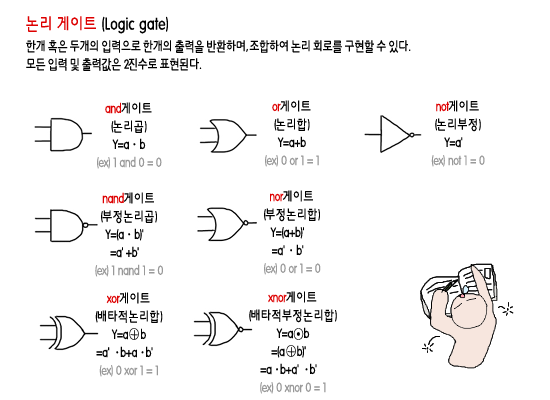
<style>
.page{position:relative;width:550px;height:400px;background:#ffffff}
.page>*{position:absolute;margin:0}
.t1{font:14px/18px "HYkanM";letter-spacing:-0.1em;color:#000000;scale:0.8 1}
.t2{font:18px/24px "HYkanM";letter-spacing:-0.05em;color:#dd0000;scale:0.8 1}
.t3{font:18px/24px "HYkanM";letter-spacing:-0.01em;color:#000000;scale:0.8 1}
.t4{font:14px/18px "HYkanM";letter-spacing:-0.05em;color:#999999;scale:0.8 1}
.t5{font:14px/18px "HYkanM";letter-spacing:-0.05em;color:#dd0000;scale:0.8 1}
.t6{font:14px/18px "HYkanM";letter-spacing:-0.05em;color:#000000;scale:0.8 1}
.t7{font:14px/18px "HYkanM";letter-spacing:-0.5em;color:#000000;scale:0.8 1}
.t8{font:14px/18px "HYkanM";letter-spacing:-0.6em;color:#000000;scale:0.8 1}
.t9{font:14px/18px "HYkanM";letter-spacing:-0.2em;color:#000000;scale:0.8 1}
</style>
<div class="page">
<p class="t1" style="left:26px;top:16px;width:385px;height:55px"><span class="t2">논리 게이트 </span><span class="t3">(Logic gate)<br></span>한개 혹은 두개의 입력으로 한개의 출력을 반환하며, 조합하여 논리 회로를 구현할 수 있다. <br>모든 입력 및 출력값은 2진수로 표현된다.</p>
<p class="t4" style="left:97px;top:102px;width:65px;height:67px;text-align:center"><span class="t5">and</span><span class="t6">게이트<br>(논리곱)<br>Y=a・b<br></span>(ex) 1 and 0 = 0</p>
<p class="t6" style="left:265px;top:100px;width:54px;height:67px;text-align:center"><span class="t5">or</span>게이트<br>(논리합)<br>Y=a+b<br><span class="t4">(ex) 0 or 1 = 1</span></p>
<p class="t6" style="left:431px;top:100px;width:54px;height:67px;text-align:center"><span class="t5">not</span>게이트<br>(논리부정)<br>Y=a’<br><span class="t4">(ex) not 1 = 0</span></p>
<p class="t6" style="left:95px;top:192px;width:68px;height:85px;text-align:center"><span class="t5">nand</span>게이트<br>(부정논리곱)<br>Y=(a・b)’<br>=a<span class="t7">’</span>+b’<br><span class="t4">(ex) 1 nand 1 = 0</span></p>
<p class="t6" style="left:264px;top:190px;width:57px;height:85px;text-align:center"><span class="t5">nor</span>게이트<br>(부정논리합)<br>Y=(a+b)’<br>=a<span class="t8">’</span>・b’<br><span class="t4">(ex) 0 or 1 = 0</span></p>
<p class="t6" style="left:95px;top:292px;width:68px;height:85px;text-align:center"><span class="t5">xor</span>게이트<br>(배타적논리합)<br>Y=a    b<br>=a<span class="t7">’</span><span class="t9">・</span>b+a<span class="t9">・</span>b’<br><span class="t4">(ex) 0 xor 1 = 1</span></p>
<p class="t6" style="left:249px;top:291px;width:88px;height:103px;text-align:center"><span class="t5">xnor</span>게이트<br>(배타적부정논리합)<br>Y=a◉b<br>=(a    b)’<br>=a<span class="t9">・</span>b+a<span class="t7">’</span><span class="t9">・</span>b’<br><span class="t4">(ex) 0 xnor 0 = 1</span></p>
</div>
